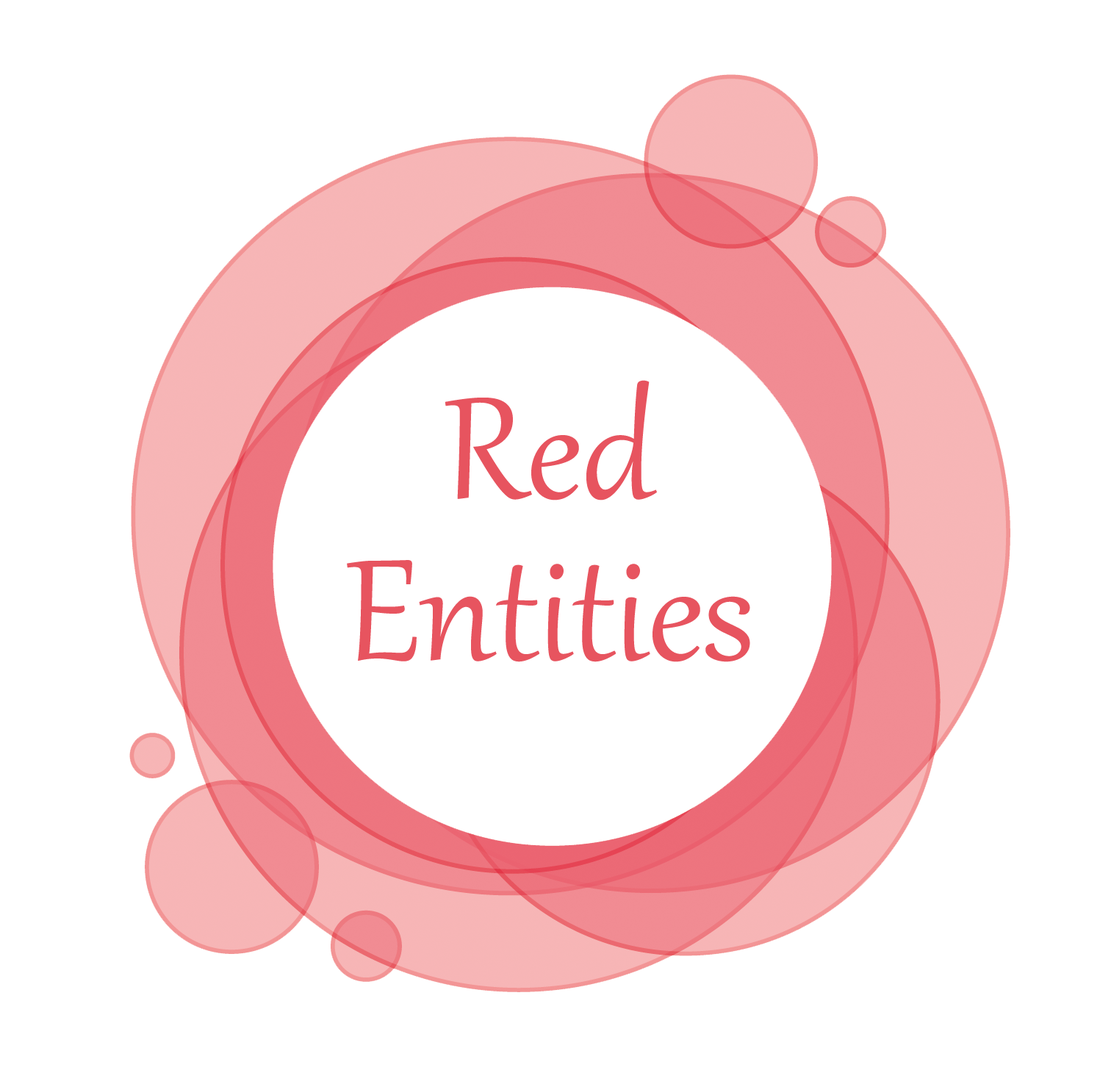
<style>
.page{position:relative;width:1111px;height:1073px;background:#ffffff}
.page>*{position:absolute;margin:0}
.t1{font:176.4px/161.7px "Gabriola";color:#e7545f}
</style>
<div class="page">
<p class="t1" style="left:347px;top:380px;width:403px;height:282px;text-align:center">Red<br>Entities</p>
</div>
